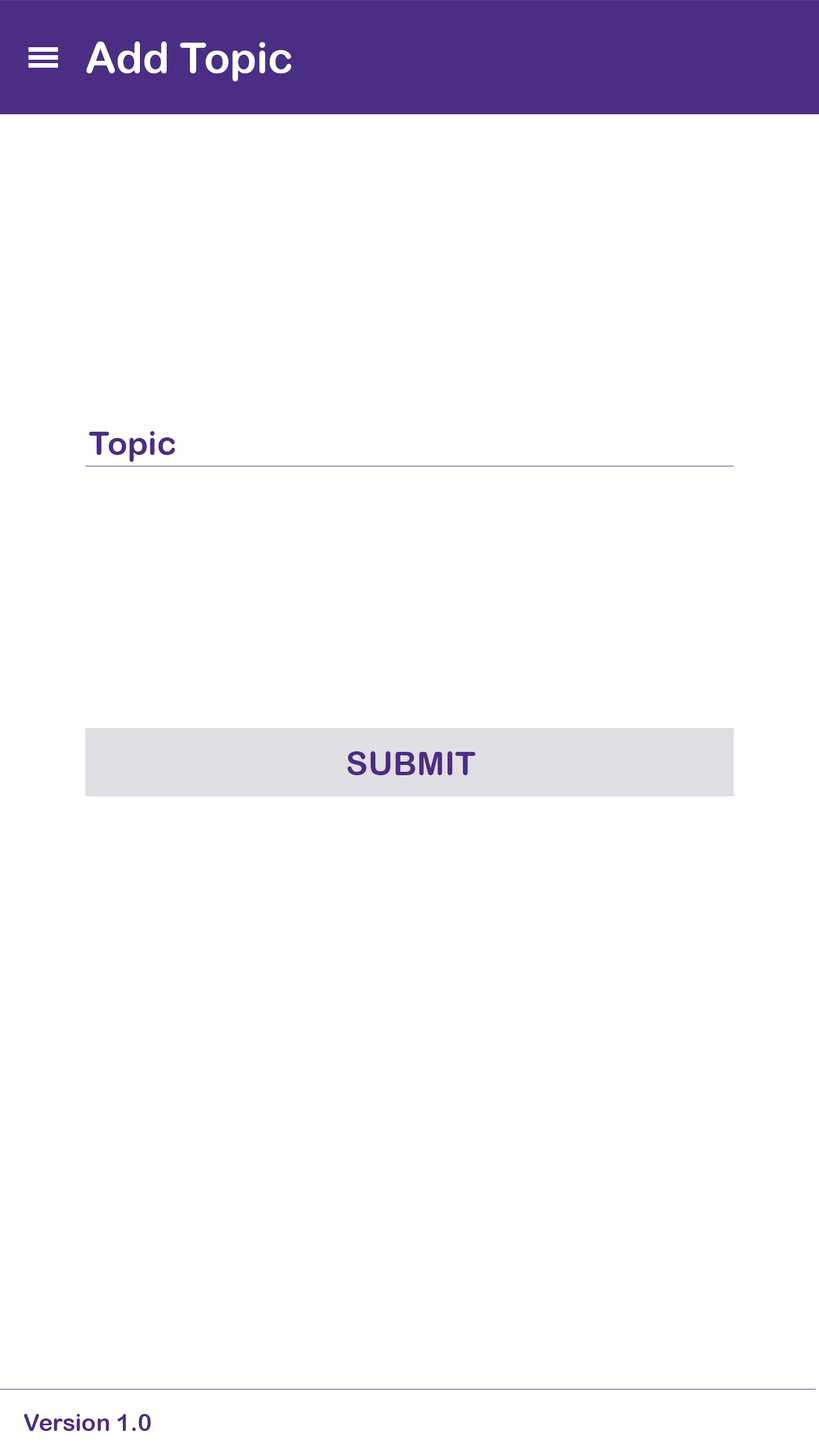
<style>
.page{position:relative;width:819px;height:1456px;background:#ffffff}
.page>*{position:absolute;margin:0}
.t1{font:42.7px "ArialRoundedMTBold";color:#ffffff}
.t2{font:33.2px "ArialRoundedMTBold";color:#4b2e83}
.t3{font:23.7px "ArialRoundedMTBold";color:#4b2e83}
</style>
<div class="page">
<p class="t1" style="left:86px;top:42px;width:205px;height:39px">Add Topic</p>
<p class="t2" style="left:89px;top:431px;width:86px;height:31px">Topic</p>
<p class="t2" style="left:348px;top:751px;width:127px;height:24px">SUBMIT</p>
<p class="t3" style="left:24px;top:1414px;width:127px;height:17px">Version 1.0</p>
</div>
